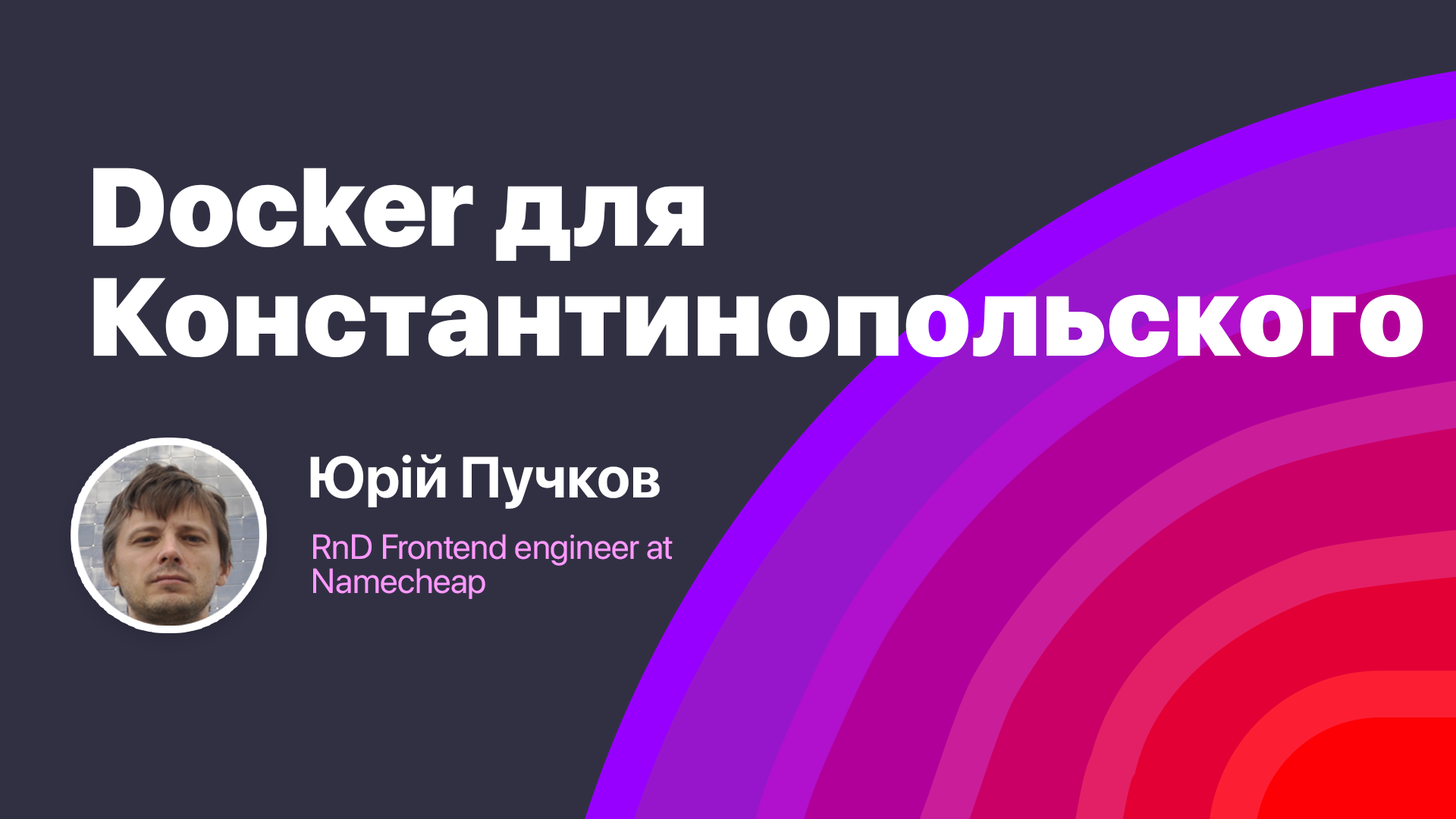
<style>
.page{position:relative;width:1456px;height:819px;background:#313043}
.page>*{position:absolute;margin:0}
.t1{font:110px/110px "SFProDisplay-Black";color:#ffffff}
.t2{font:57.6px "SFProDisplay-Bold";color:#ffffff}
.t3{font:34.6px/34.6px "SFProDisplay-Regular";color:#ff99ff}
</style>
<div class="page">
<p class="t1" style="left:93px;top:168px;width:1330px;height:189px">Docker для <br>Константинопольского</p>
<p class="t2" style="left:310px;top:454px;width:350px;height:55px">Юрій Пучков</p>
<p class="t3" style="left:313px;top:534px;width:360px;height:65px">RnD Frontend engineer at <br>Namecheap</p>
</div>
